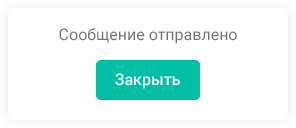
<style>
.page{position:relative;width:296px;height:128px;background:#ffffff}
.page>*{position:absolute;margin:0}
.t1{font:16px "Roboto-Regular";color:#707476}
.t2{font:16px "Roboto-Medium";color:#ddf3ef}
</style>
<div class="page">
<p class="t1" style="left:59px;top:27px;width:178px;height:17px">Сообщение отправлено</p>
<p class="t2" style="left:115px;top:73px;width:65px;height:16px">Закрыть</p>
</div>
